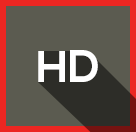
<style>
.page{position:relative;width:136px;height:132px;background:#5b5b50}
.page>*{position:absolute;margin:0}
.t1{font:44.4px "NexaBold";color:#ffffff}
</style>
<div class="page">
<p class="t1" style="left:38px;top:50px;width:60px;height:32px">HD</p>
</div>
